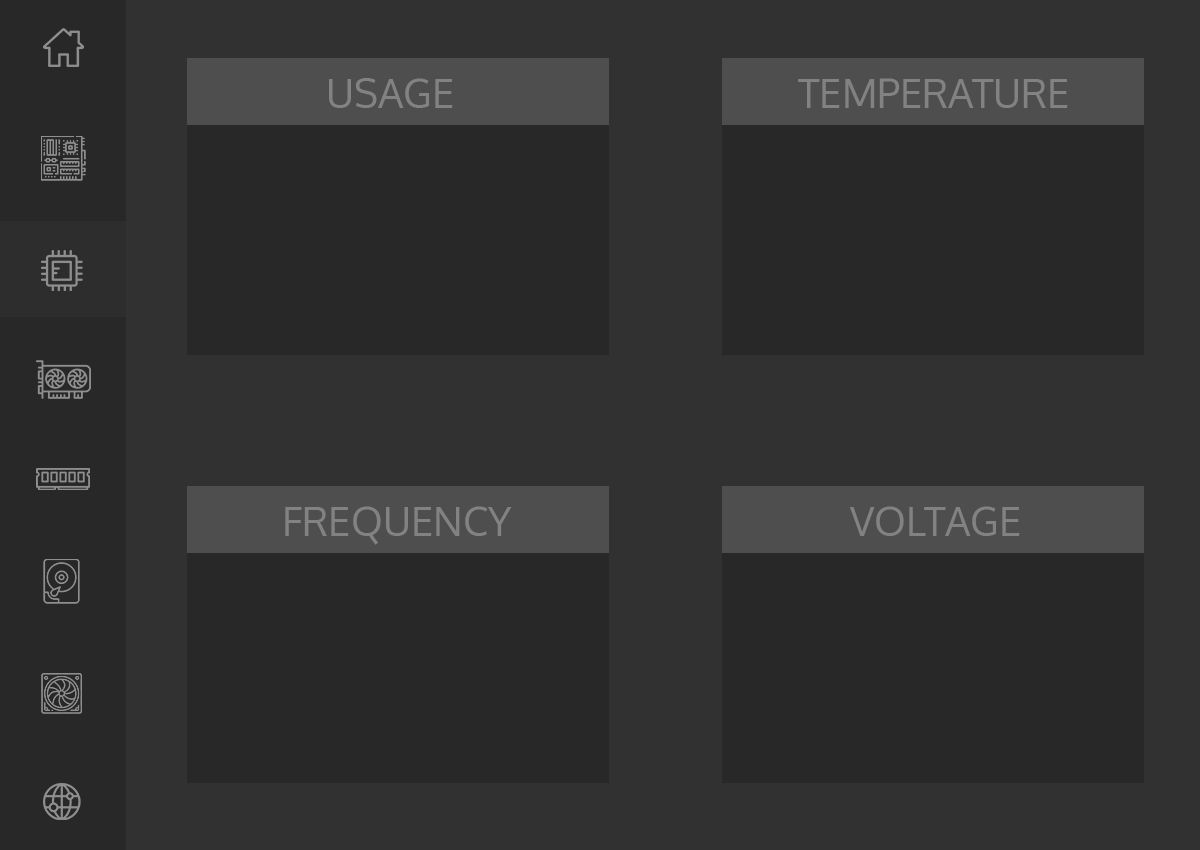
<style>
.page{position:relative;width:1200px;height:850px;background:#282828}
.page>*{position:absolute;margin:0}
.t1{font:40px "Oxygen-Regular";color:#828282}
</style>
<div class="page">
<p class="t1" style="left:329px;top:78px;width:124px;height:30px">USAGE</p>
<p class="t1" style="left:798px;top:78px;width:270px;height:30px">TEMPERATURE</p>
<p class="t1" style="left:285px;top:506px;width:227px;height:39px">FREQUENCY</p>
<p class="t1" style="left:849px;top:506px;width:171px;height:30px">VOLTAGE</p>
</div>
